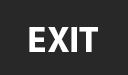
<style>
.page{position:relative;width:128px;height:75px;background:#282828}
.page>*{position:absolute;margin:0}
.t1{font:36px "MyriadPro-Bold";color:#ffffff}
</style>
<div class="page">
<p class="t1" style="left:29px;top:27px;width:69px;height:25px">EXIT</p>
</div>
